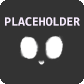
<style>
.page{position:relative;width:84px;height:84px;background:#333333}
.page>*{position:absolute;margin:0}
.t1{font:12.5px "Consolas-Bold";color:#f8ecff}
</style>
<div class="page">
<p class="t1" style="left:5px;top:17px;width:75px;height:9px">PLACEHOLDER</p>
</div>
